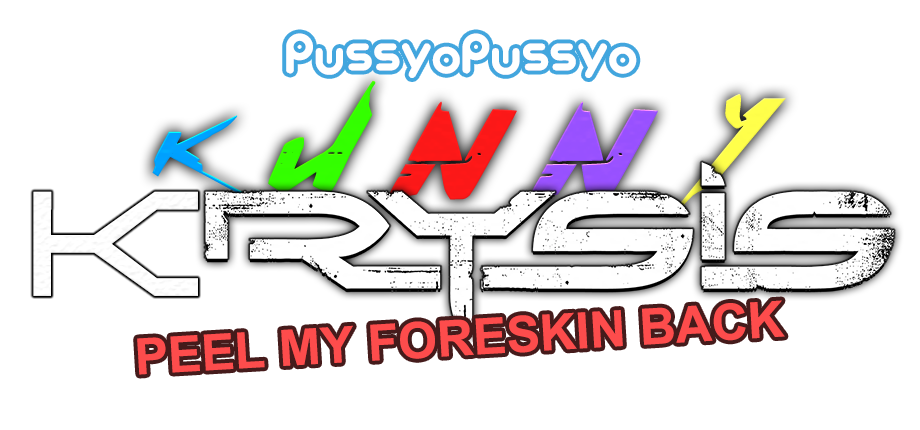
<style>
.page{position:relative;width:920px;height:430px;background:#ffffff}
.page>*{position:absolute;margin:0}
.t1{font:47.6px "Popping_Puzzle";color:#ffffff}
.t2{font:151.8px "Cyberpunk-Regular";letter-spacing:-0.025em;color:#00a1ff}
.t3{font:151.8px "Cyberpunk-Regular";letter-spacing:-0.025em;color:#33ff00}
.t4{font:151.8px "Cyberpunk-Regular";letter-spacing:-0.025em;color:#fb1818}
.t5{font:151.8px "Cyberpunk-Regular";letter-spacing:-0.025em;color:#9851ff}
.t6{font:151.8px "Cyberpunk-Regular";letter-spacing:-0.025em;color:#ffff4a}
.t7{font:50px "Arial-BoldMT";color:#fd4c4c}
</style>
<div class="page">
<p class="t1" style="left:286px;top:33px;width:351px;height:45px">PussyoPussyo</p>
<p class="t2" style="left:152px;top:80px;width:634px;height:135px">k<span class="t3">U</span><span class="t4">N</span><span class="t5">N</span><span class="t6">Y</span></p>
<p class="t7" style="left:137px;top:300px;width:648px;height:75px;rotate:-3deg">PEEL MY FORESKIN BACK</p>
</div>
